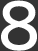
<style>
.page{position:relative;width:38px;height:51px;background:#333333}
.page>*{position:absolute;margin:0}
.t1{font:66.7px "RoundedMplus1c-Medium";color:#ffffff}
</style>
<div class="page">
<p class="t1" style="left:1px;top:0px;width:36px;height:51px">8</p>
</div>
